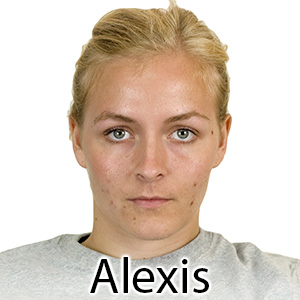
<style>
.page{position:relative;width:300px;height:300px;background:#ffffff}
.page>*{position:absolute;margin:0}
.t1{font:50px "MyriadPro-Regular";color:#000000}
</style>
<div class="page">
<p class="t1" style="left:90px;top:257px;width:119px;height:36px">Alexis</p>
</div>
